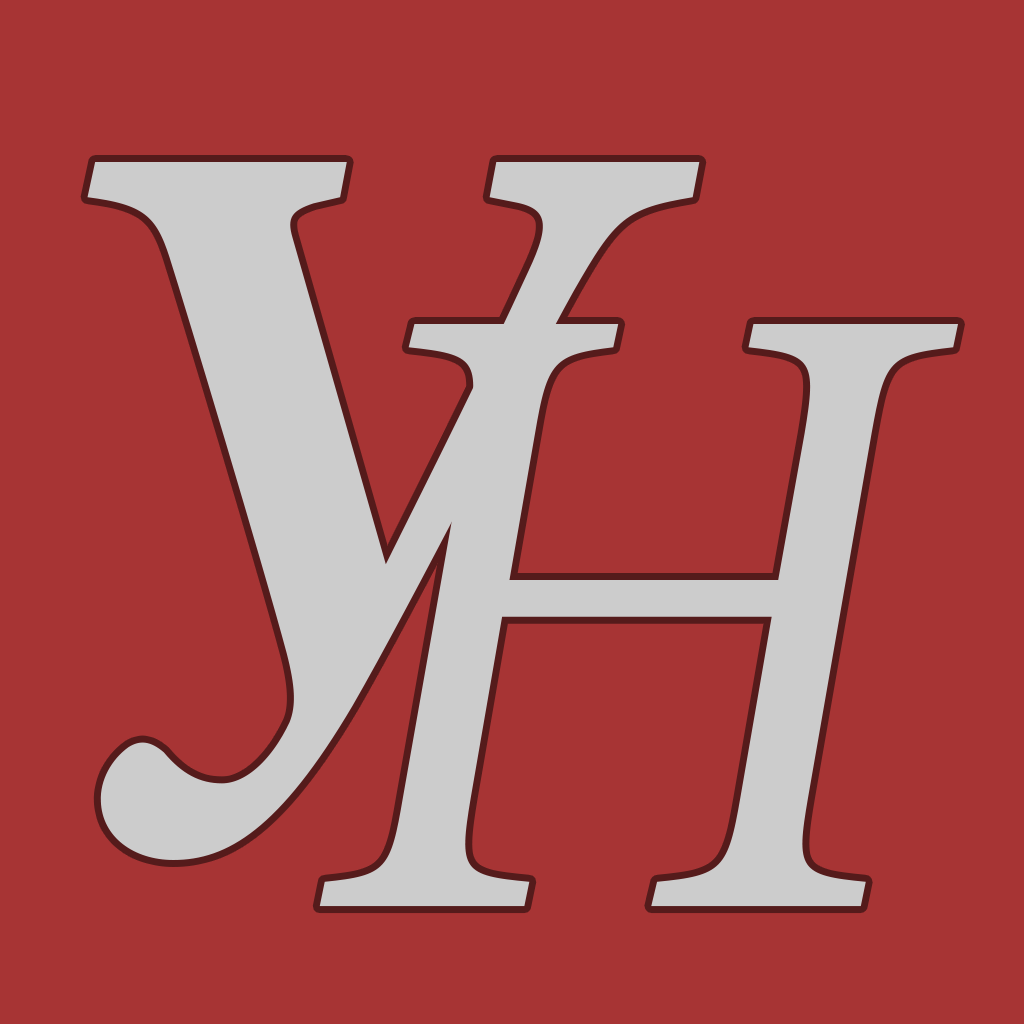
<style>
.page{position:relative;width:1024px;height:1024px;background:#a73434}
.page>*{position:absolute;margin:0}
.t1{font:1034.5px "MinionPro-BoldIt";color:#cccccc;scale:0.92 1}
.t2{font:895.2px "MinionPro-It";color:#cccccc;scale:0.92 1}
</style>
<div class="page">
<p class="t1" style="left:87px;top:162px;width:613px;height:698px">У</p>
<p class="t2" style="left:319px;top:324px;width:639px;height:583px">Н</p>
</div>
